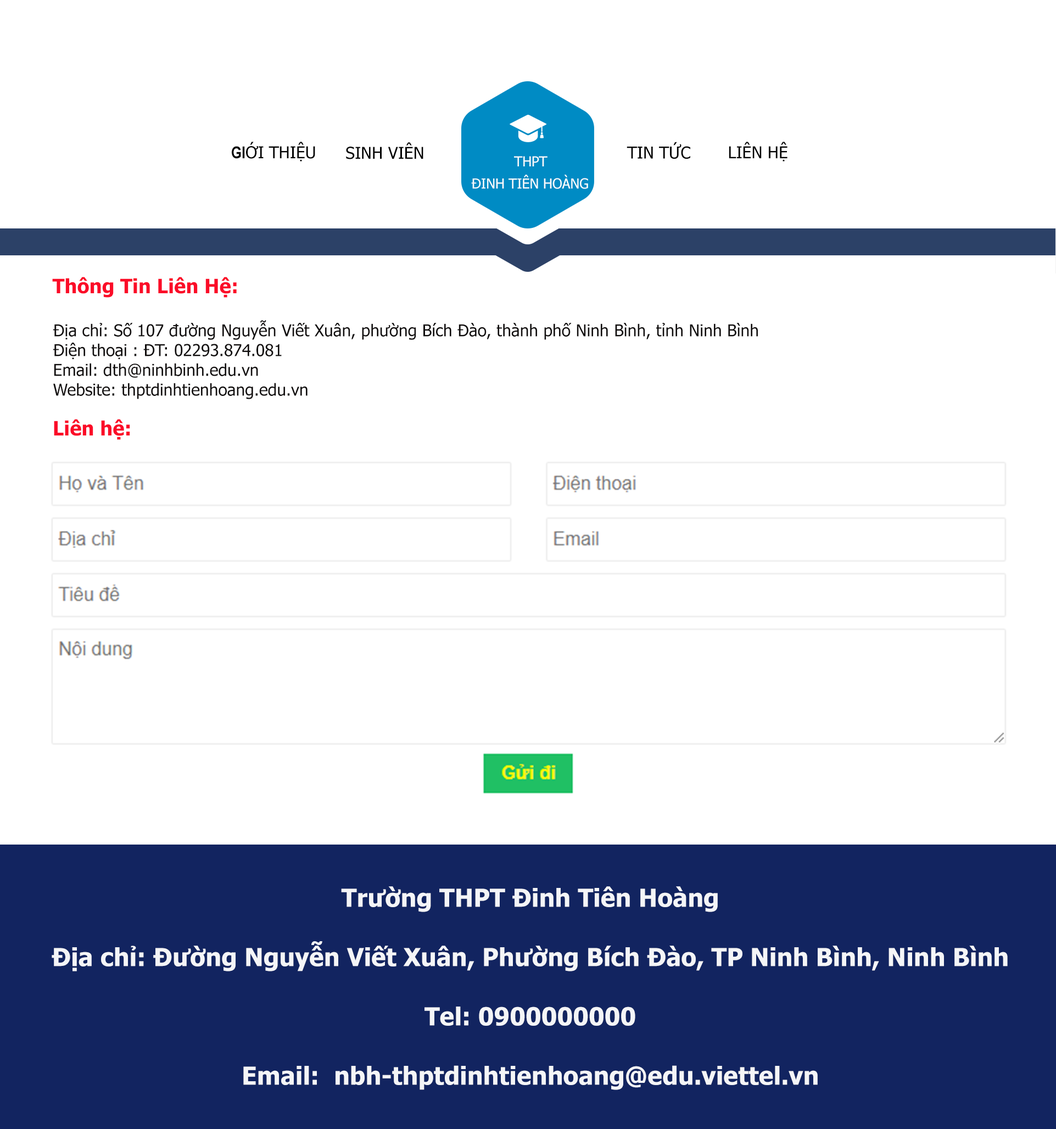
<style>
.page{position:relative;width:1056px;height:1129px;background:#ffffff}
.page>*{position:absolute;margin:0}
.t1{font:16.5px "Tahoma";color:#000000}
.t2{font:16.5px "ArialNarrow-Bold";color:#000000}
.t3{font:13.7px "Tahoma";color:#f8fcfd}
.t4{font:19.8px "Tahoma-Bold";color:#fb0c28}
.t5{font:16.5px "Tahoma";color:#100d0d}
.t6{font:24.7px "Tahoma-Bold";color:#f4f5f7}
</style>
<div class="page">
<p class="t1" style="left:232px;top:142px;width:83px;height:19px"><span class="t2">GI</span>ỚI THIỆU</p>
<p class="t1" style="left:346px;top:142px;width:77px;height:17px">SINH VIÊN</p>
<p class="t1" style="left:627px;top:142px;width:63px;height:17px">TIN TỨC</p>
<p class="t1" style="left:729px;top:142px;width:59px;height:19px">LIÊN HỆ</p>
<p class="t3" style="left:514px;top:156px;width:34px;height:10px">THPT</p>
<p class="t3" style="left:471px;top:175px;width:117px;height:14px">ĐINH TIÊN HOÀNG</p>
<p class="t4" style="left:52px;top:277px;width:185px;height:21px">Thông Tin Liên Hệ:</p>
<p class="t5" style="left:53px;top:320px;width:705px;height:79px">Địa chỉ: Số 107 đường Nguyễn Viết Xuân, phường Bích Đào, thành phố Ninh Bình, tỉnh Ninh Bình<br>Điện thoại : ĐT: 02293.874.081<br>Email: dth@ninhbinh.edu.vn<br>Website: thptdinhtienhoang.edu.vn</p>
<p class="t4" style="left:54px;top:419px;width:76px;height:21px">Liên hệ:</p>
<p class="t6" style="left:52px;top:886px;width:956px;height:204px;text-align:center">Trường THPT Đinh Tiên Hoàng<br><br>Địa chỉ: Đường Nguyễn Viết Xuân, Phường Bích Đào, TP Ninh Bình, Ninh Bình<br><br>Tel: 0900000000<br><br>Email:  nbh-thptdinhtienhoang@edu.viettel.vn</p>
</div>
